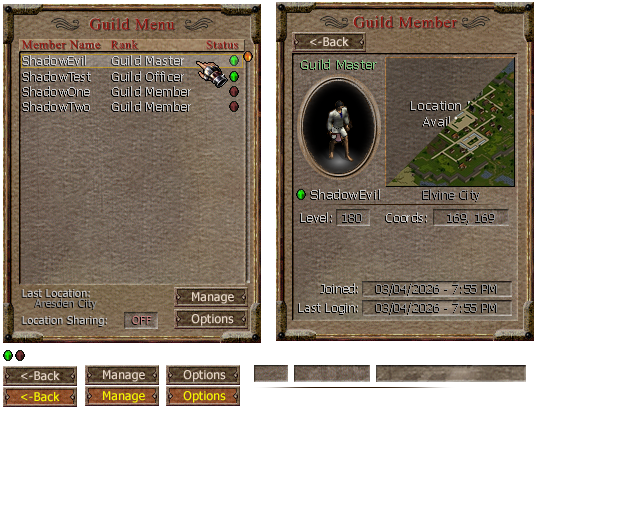
<style>
.page{position:relative;width:619px;height:520px;background:#ffffff}
.page>*{position:absolute;margin:0}
.t1{font:16.6px "TimesNewRomanPSMT";letter-spacing:0.05em}
.t2{font:16px "TimesNewRomanPSMT";letter-spacing:0.05em;color:#941810}
.t3{font:12px "TimesNewRomanPSMT";letter-spacing:0.05em;color:#941810}
.t4{font:12px "TimesNewRomanPSMT";letter-spacing:0.05em}
.t5{font:12px "Tahoma";letter-spacing:0.05em;color:#c8c8c8}
.t6{font:13.3px "Tahoma";letter-spacing:0.025em;color:#82c882}
.t7{font:13.3px "Tahoma";letter-spacing:0.025em}
.t8{font:13.3px "Tahoma";letter-spacing:0.025em;color:#c8c8c8}
.t9{font:12px "Tahoma";letter-spacing:0.025em;color:#969696}
.t10{font:12px "Tahoma";letter-spacing:0.025em;color:#c8c8c8}
.t11{font:10.7px "Tahoma";letter-spacing:0.025em;color:#c8c8c8}
.t12{font:10.7px "Tahoma";letter-spacing:0.025em;color:#969696}
.t13{font:10.7px "Tahoma";letter-spacing:0.025em;color:#c88282}
.t14{font:12px "Tahoma";letter-spacing:0.025em;color:#e7d6c6}
.t15{font:12px "Tahoma";letter-spacing:0.025em;color:#f7f700}
</style>
<div class="page">
<p class="t1" style="left:89px;top:17px;width:86px;height:13px">Guild Menu</p>
<p class="t2" style="left:353px;top:16px;width:104px;height:12px">Guild Member</p>
<p class="t1" style="left:353px;top:15px;width:104px;height:13px">Guild Member</p>
<p class="t2" style="left:89px;top:18px;width:86px;height:12px">Guild Menu</p>
<p class="t3" style="left:21px;top:39px;width:79px;height:10px">Member Name</p>
<p class="t4" style="left:22px;top:39px;width:77px;height:10px">Member Name</p>
<p class="t3" style="left:110px;top:39px;width:28px;height:10px">Rank</p>
<p class="t4" style="left:110px;top:39px;width:27px;height:10px">Rank</p>
<p class="t3" style="left:206px;top:40px;width:32px;height:9px">Status</p>
<p class="t4" style="left:206px;top:39px;width:31px;height:10px">Status</p>
<p class="t5" style="left:23px;top:55px;width:63px;height:10px">ShadowEvil</p>
<p class="t5" style="left:112px;top:55px;width:72px;height:10px">Guild Master</p>
<p class="t6" style="left:301px;top:59px;width:76px;height:10px">Guild Master</p>
<p class="t5" style="left:23px;top:71px;width:68px;height:10px">ShadowTest</p>
<p class="t5" style="left:112px;top:71px;width:72px;height:10px">Guild Officer</p>
<p class="t5" style="left:23px;top:86px;width:67px;height:10px">ShadowOne</p>
<p class="t5" style="left:112px;top:86px;width:79px;height:10px">Guild Member</p>
<p class="t5" style="left:23px;top:101px;width:67px;height:10px">ShadowTwo</p>
<p class="t5" style="left:112px;top:101px;width:79px;height:10px">Guild Member</p>
<p class="t7" style="left:411px;top:101px;width:77px;height:25px;text-align:center">Location Not<br>Available</p>
<p class="t8" style="left:311px;top:189px;width:69px;height:10px">ShadowEvil</p>
<p class="t9" style="left:423px;top:189px;width:57px;height:12px">Elvine City</p>
<p class="t10" style="left:301px;top:212px;width:31px;height:10px">Level:</p>
<p class="t9" style="left:343px;top:213px;width:19px;height:9px">180</p>
<p class="t10" style="left:386px;top:212px;width:41px;height:10px">Coords:</p>
<p class="t9" style="left:448px;top:213px;width:47px;height:11px">169, 169</p>
<p class="t11" style="left:22px;top:289px;width:68px;height:8px">Last Location:</p>
<p class="t10" style="left:321px;top:283px;width:37px;height:10px">Joined:</p>
<p class="t9" style="left:376px;top:283px;width:121px;height:12px">03/04/2026 - 7:55 PM</p>
<p class="t12" style="left:35px;top:298px;width:62px;height:11px">Aresden City</p>
<p class="t10" style="left:299px;top:303px;width:59px;height:11px">Last Login:</p>
<p class="t9" style="left:376px;top:302px;width:121px;height:12px">03/04/2026 - 7:55 PM</p>
<p class="t11" style="left:22px;top:315px;width:85px;height:11px">Location Sharing:</p>
<p class="t13" style="left:132px;top:315px;width:20px;height:9px">OFF</p>
<p class="t14" style="left:21px;top:371px;width:39px;height:10px">&lt;-Back</p>
<p class="t14" style="left:103px;top:370px;width:42px;height:12px">Manage</p>
<p class="t14" style="left:183px;top:370px;width:43px;height:12px">Options</p>
<p class="t15" style="left:21px;top:392px;width:39px;height:10px">&lt;-Back</p>
<p class="t15" style="left:103px;top:391px;width:42px;height:12px">Manage</p>
<p class="t15" style="left:183px;top:391px;width:43px;height:12px">Options</p>
</div>
